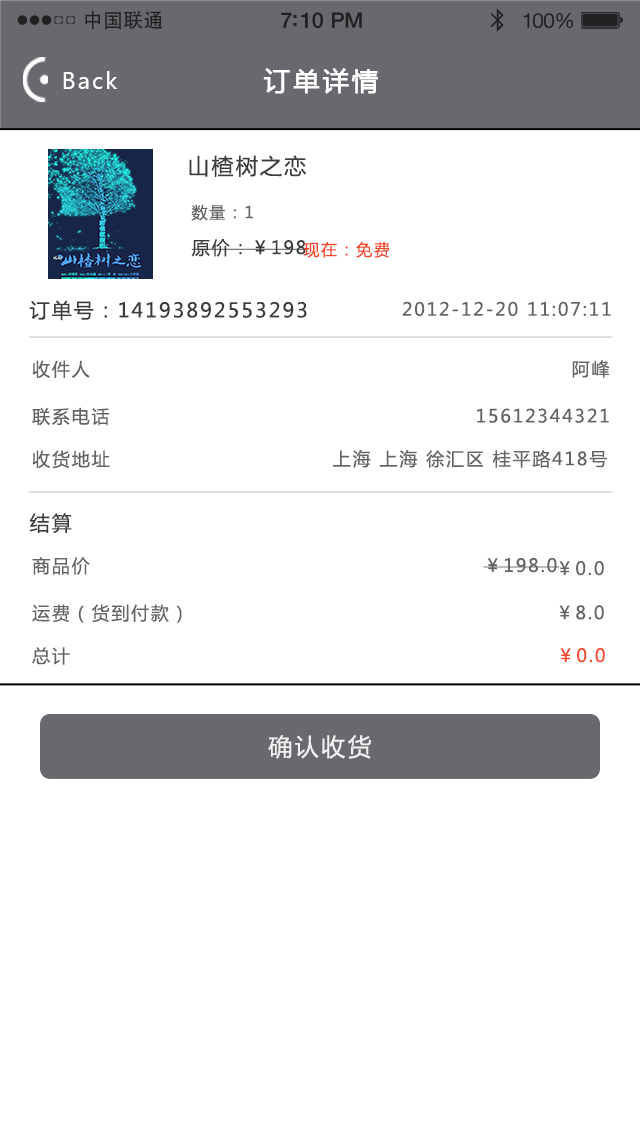
<style>
.page{position:relative;width:640px;height:1136px;background:#ffffff}
.page>*{position:absolute;margin:0}
.t1{font:19.7px "AdobeHeitiStd-Regular";letter-spacing:0.02em;color:#212121}
.t2{font:21.4px "HelveticaNeue-Medium";letter-spacing:-0.02em;color:#212121}
.t3{font:20.6px "HelveticaNeue";letter-spacing:-0.02em;color:#212121}
.t4{font:22px "MicrosoftYaHei";letter-spacing:0.1em;color:#ffffff}
.t5{font:26px "MicrosoftYaHei";letter-spacing:0.1em;color:#ffffff;font-weight:bold}
.t6{font:22px "MicrosoftYaHei";letter-spacing:0.1em;color:#3c3c3c}
.t7{font:16px "MicrosoftYaHei";letter-spacing:0.1em;color:#646464}
.t8{font:18px "MicrosoftYaHei";letter-spacing:0.1em;color:#3c3c3c}
.t9{font:16px "MicrosoftYaHei";letter-spacing:0.1em;color:#f6462c}
.t10{font:20px "MicrosoftYaHei";letter-spacing:0.1em;color:#3c3c3c}
.t11{font:18px "MicrosoftYaHei";letter-spacing:0.1em;color:#646464}
.t12{font:18px "MicrosoftYaHei";letter-spacing:0.1em;color:#f6462c}
.t13{font:24px "MicrosoftYaHei";letter-spacing:0.1em;color:#f0f0f0}
</style>
<div class="page">
<p class="t1" style="left:85px;top:10px;width:78px;height:20px">中国联通</p>
<p class="t2" style="left:281px;top:12px;width:81px;height:16px">7:10 PM</p>
<p class="t3" style="left:523px;top:13px;width:50px;height:16px">100%</p>
<p class="t4" style="left:63px;top:71px;width:55px;height:18px">Back</p>
<p class="t5" style="left:263px;top:68px;width:115px;height:26px">订单详情</p>
<p class="t6" style="left:189px;top:155px;width:117px;height:22px">山楂树之恋</p>
<p class="t7" style="left:191px;top:204px;width:62px;height:17px">数量：1</p>
<p class="t8" style="left:191px;top:239px;width:118px;height:18px">原价：￥198</p>
<p class="t9" style="left:303px;top:242px;width:87px;height:16px">现在：免费</p>
<p class="t10" style="left:29px;top:300px;width:278px;height:21px">订单号：14193892553293</p>
<p class="t11" style="left:402px;top:301px;width:209px;height:15px">2012-12-20 11:07:11</p>
<p class="t11" style="left:32px;top:360px;width:58px;height:18px">收件人</p>
<p class="t11" style="left:572px;top:360px;width:38px;height:18px">阿峰</p>
<p class="t11" style="left:32px;top:407px;width:78px;height:19px">联系电话</p>
<p class="t11" style="left:477px;top:408px;width:132px;height:15px">15612344321</p>
<p class="t11" style="left:32px;top:450px;width:78px;height:19px">收货地址</p>
<p class="t11" style="left:333px;top:450px;width:274px;height:18px">上海 上海 徐汇区 桂平路418号</p>
<p class="t10" style="left:29px;top:513px;width:43px;height:20px">结算</p>
<p class="t11" style="left:32px;top:557px;width:58px;height:18px">商品价</p>
<p class="t11" style="left:483px;top:557px;width:77px;height:16px">￥198.0</p>
<p class="t11" style="left:559px;top:561px;width:45px;height:15px">￥0.0</p>
<p class="t11" style="left:32px;top:604px;width:150px;height:19px">运费（货到付款）</p>
<p class="t11" style="left:559px;top:605px;width:45px;height:15px">￥8.0</p>
<p class="t11" style="left:32px;top:647px;width:38px;height:18px">总计</p>
<p class="t12" style="left:560px;top:648px;width:45px;height:15px">￥0.0</p>
<p class="t13" style="left:268px;top:735px;width:103px;height:24px">确认收货</p>
</div>
